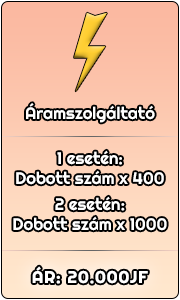
<style>
.page{position:relative;width:180px;height:300px}
.page>*{position:absolute;margin:0}
.t1{font:16.7px "Righteous-Regular";color:#ffffff}
.t2{font:16.7px "Righteous-Regular";letter-spacing:0.035em;color:#ffffff;font-weight:bold}
</style>
<div class="page">
<p class="t1" style="left:26px;top:103px;width:129px;height:20px">Áramszolgáltató</p>
<p class="t1" style="left:16px;top:150px;width:148px;height:35px;text-align:center">1 esetén:<br>Dobott szám x 400</p>
<p class="t1" style="left:13px;top:196px;width:154px;height:35px;text-align:center">2 esetén:<br>Dobott szám x 1000</p>
<p class="t2" style="left:32px;top:266px;width:116px;height:18px">ÁR: 20.000JF</p>
</div>
